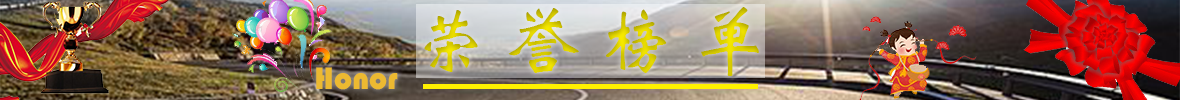
<style>
.page{position:relative;width:1180px;height:100px}
.page>*{position:absolute;margin:0}
.t1{font:75.4px "STXinwei";color:#d7cb00}
.t2{font:32.2px "STHupo";color:#ecb931}
</style>
<div class="page">
<p class="t1" style="left:424px;top:7px;width:335px;height:69px">荣 誉 榜 单</p>
<p class="t2" style="left:316px;top:67px;width:82px;height:23px">Honor</p>
</div>
